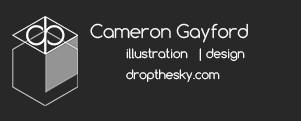
<style>
.page{position:relative;width:301px;height:121px;background:#282828}
.page>*{position:absolute;margin:0}
.t1{font:12px "Comfortaa-Light";color:#ffffff}
.t2{font:18px "Comfortaa-Light";color:#ffffff;text-transform:uppercase}
.t3{font:18px "Comfortaa-Light";color:#ffffff}
</style>
<div class="page">
<p class="t1" style="left:90px;top:23px;width:158px;height:59px"><span class="t2">C</span><span class="t3">ameron Gayford<br></span> illustration | design<br> dropthesky.com</p>
</div>
